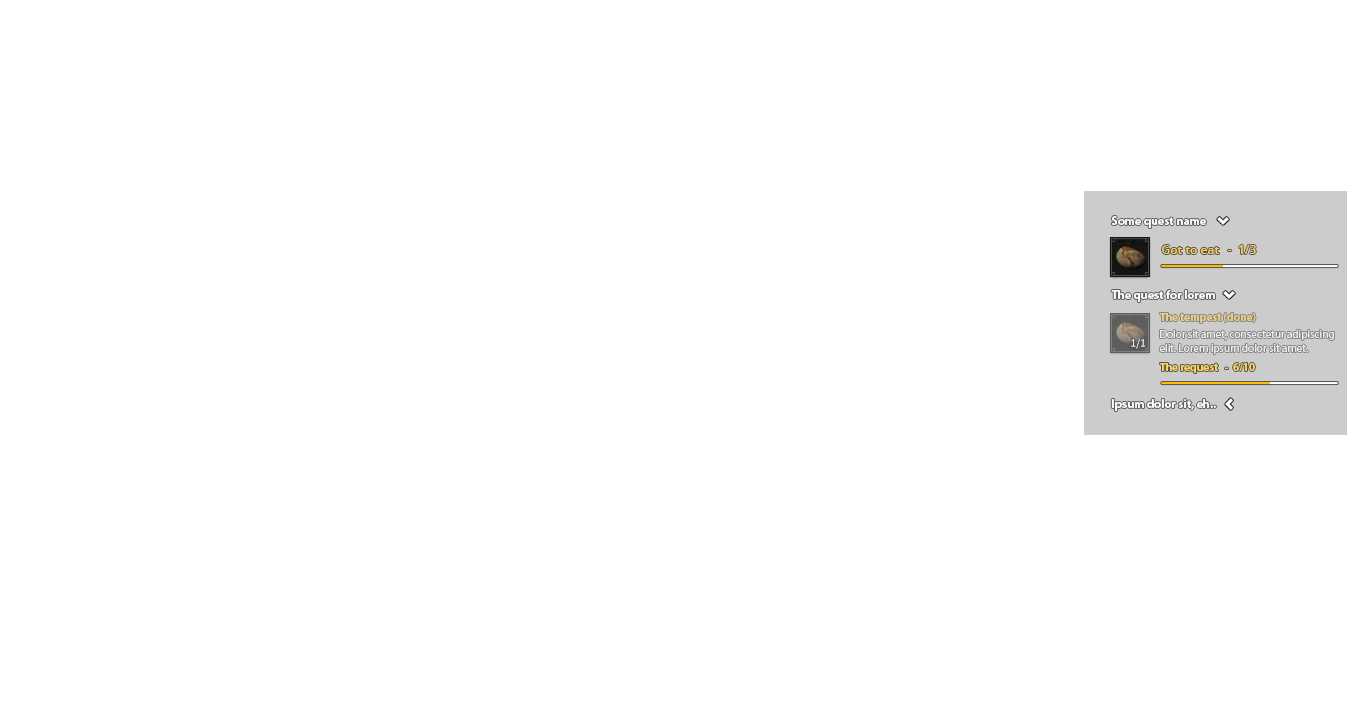
<style>
.page{position:relative;width:1347px;height:718px;background:#ffffff}
.page>*{position:absolute;margin:0}
.t1{font:12px "MyriadPro-Bold";color:#ffffff}
.t2{font:12px "OpenSans-Semibold";color:#ffd556}
.t3{font:11.2px "MyriadPro-Bold";color:#ebd185}
.t4{font:10.6px "Tahoma";color:#ffffff}
.t5{font:11.2px/14px "MyriadPro-Regular";color:#ffffff}
.t6{font:11.2px "MyriadPro-Bold";color:#ffd556}
</style>
<div class="page">
<p class="t1" style="left:1111px;top:216px;width:95px;height:12px">Some quest name</p>
<p class="t2" style="left:1162px;top:245px;width:94px;height:9px">Got to eat  -  1/3</p>
<p class="t1" style="left:1111px;top:290px;width:104px;height:12px">The quest for lorem</p>
<p class="t3" style="left:1160px;top:313px;width:96px;height:10px">The tempest (done)</p>
<p class="t4" style="left:1131px;top:338px;width:14px;height:11px">1/1</p>
<p class="t5" style="left:1159px;top:330px;width:175px;height:24px">Dolor sit amet, consectetur adipiscing elit. Lorem ipsum dolor sit amet.</p>
<p class="t6" style="left:1160px;top:363px;width:95px;height:10px">The request   -  6/10</p>
<p class="t1" style="left:1111px;top:399px;width:105px;height:12px">Ipsum dolor sit, eh..</p>
</div>
